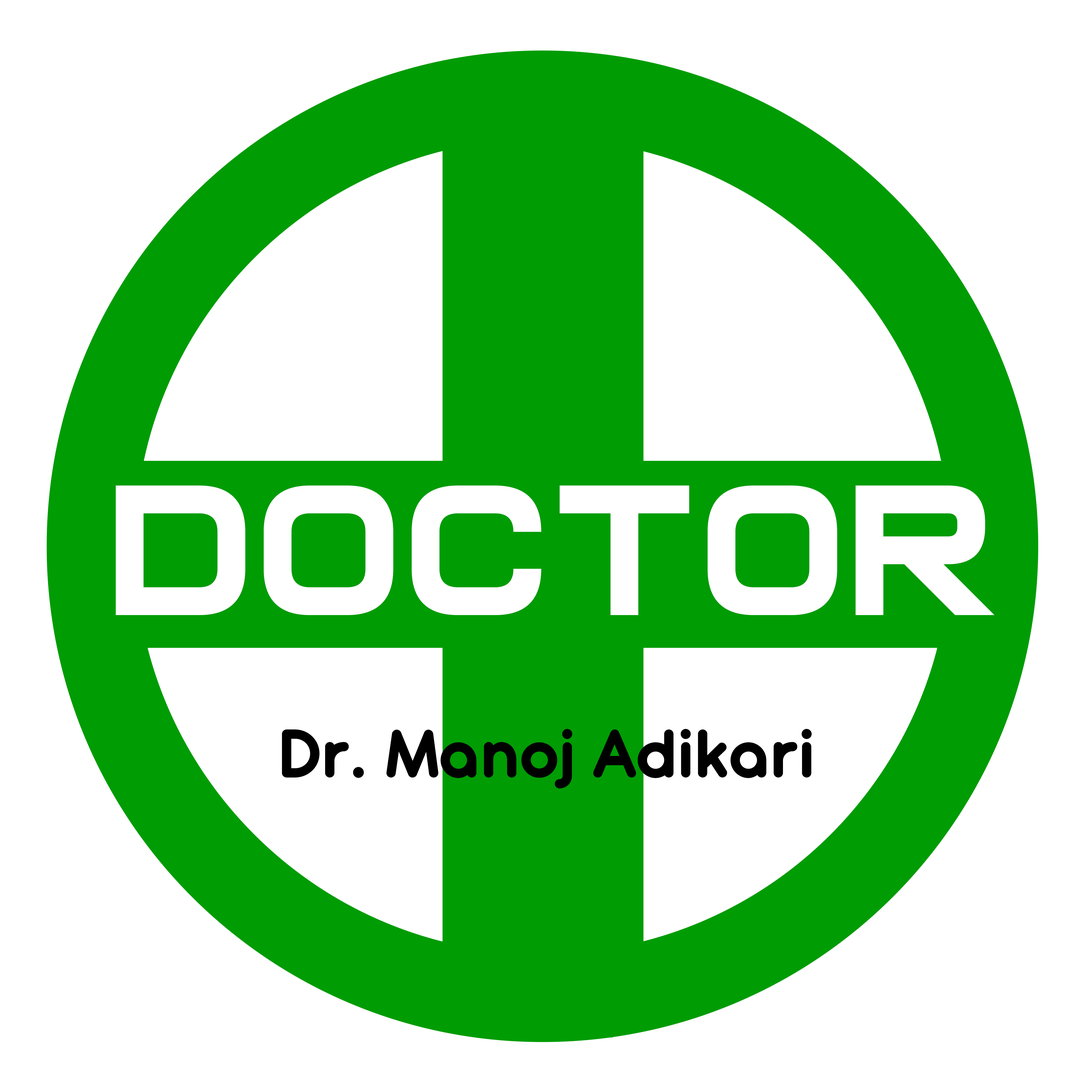
<style>
.page{position:relative;width:1092px;height:1092px;background:#ffffff}
.page>*{position:absolute;margin:0}
.t1{font:189.4px "CasanovaScotia";color:#ffffff}
.t2{font:75.1px "AntipastoPro-Bold";color:#000000}
</style>
<div class="page">
<p class="t1" style="left:116px;top:485px;width:879px;height:130px">DOCTOR</p>
<p class="t2" style="left:282px;top:729px;width:530px;height:59px">Dr. Manoj Adikari</p>
</div>
